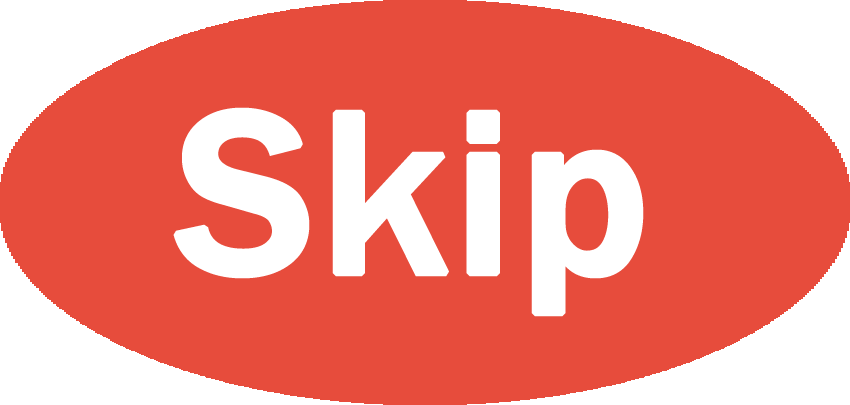
<style>
.page{position:relative;width:850px;height:405px;background:#e74c3c}
.page>*{position:absolute;margin:0}
.t1{font:240px "FranklinGothic-Medium";color:#ffffff;font-weight:bold}
</style>
<div class="page">
<p class="t1" style="left:173px;top:107px;width:471px;height:210px">Skip</p>
</div>
